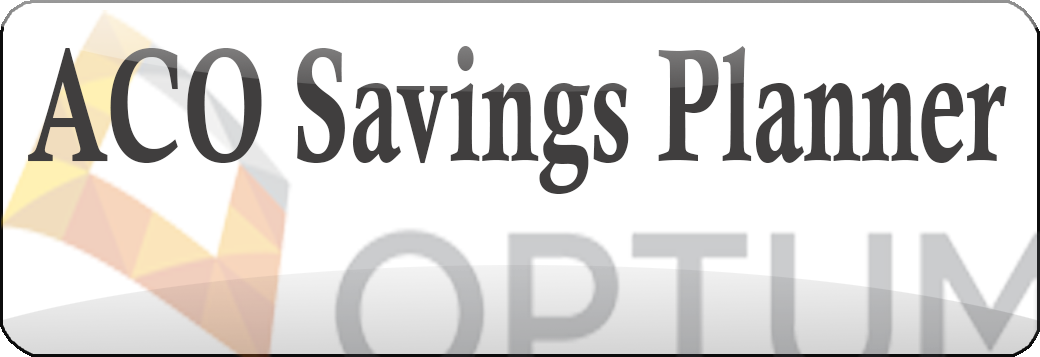
<style>
.page{position:relative;width:1040px;height:357px;background:#ffffff}
.page>*{position:absolute;margin:0}
.t1{font:159.4px "CalisMTBol";color:#403e3e;scale:0.64 1}
</style>
<div class="page">
<p class="t1" style="left:28px;top:46px;width:979px;height:148px">ACO Savings Planner</p>
</div>
